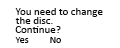
<style>
.page{position:relative;width:120px;height:48px;background:#ffffff}
.page>*{position:absolute;margin:0}
.t1{font:11px "Calibri";color:#080808}
.t2{font:10px "Calibri";color:#080808}
</style>
<div class="page">
<p class="t1" style="left:15px;top:8px;width:88px;height:9px">You need to change</p>
<p class="t1" style="left:15px;top:17px;width:38px;height:7px">the disc.</p>
<p class="t1" style="left:15px;top:26px;width:46px;height:7px">Continue?</p>
<p class="t2" style="left:15px;top:37px;width:14px;height:6px">Yes</p>
<p class="t2" style="left:50px;top:37px;width:11px;height:6px">No</p>
</div>
